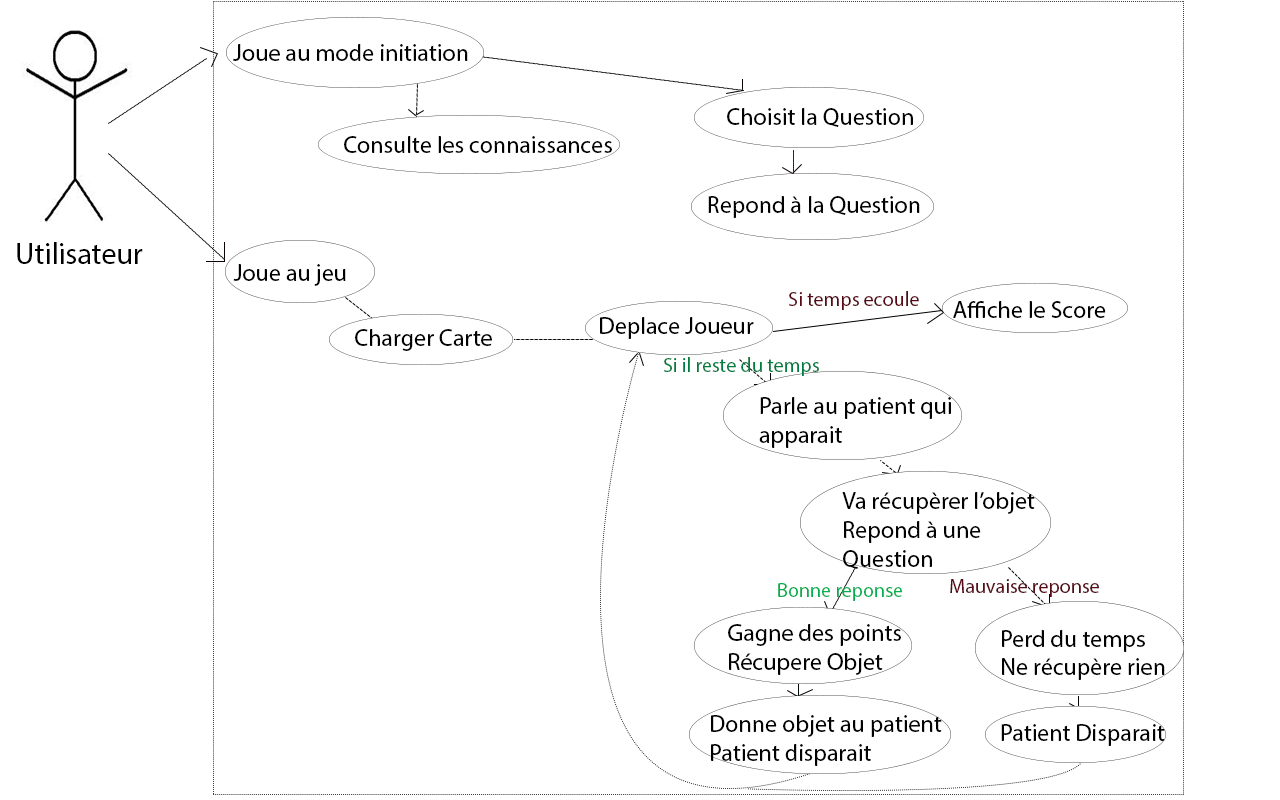
<style>
.page{position:relative;width:1280px;height:800px;background:#ffffff}
.page>*{position:absolute;margin:0}
.t1{font:24px "MyriadPro-Regular";color:#000000}
.t2{font:12px "MyriadPro-Regular";color:#000000}
.t3{font:30px "MyriadPro-Regular";color:#000000}
.t4{font:20px "MyriadPro-Regular";color:#580a16}
.t5{font:20px "MyriadPro-Regular";color:#007c3f}
.t6{font:20px "MyriadPro-Regular";color:#00af4d}
</style>
<div class="page">
<p class="t1" style="left:233px;top:44px;width:235px;height:17px">Joue au mode initiation</p>
<p class="t2" style="left:727px;top:108px;width:186px;height:19px">Choisit la Question</p>
<p class="t2" style="left:344px;top:136px;width:268px;height:17px">Consulte les connaissances</p>
<p class="t2" style="left:708px;top:196px;width:212px;height:22px">Repond à la Question</p>
<p class="t3" style="left:17px;top:242px;width:126px;height:22px">Utilisateur</p>
<p class="t2" style="left:233px;top:264px;width:113px;height:22px">Joue au jeu</p>
<p class="t4" style="left:789px;top:291px;width:130px;height:19px">Si temps ecoule</p>
<p class="t2" style="left:953px;top:301px;width:153px;height:17px">Affiche le Score</p>
<p class="t2" style="left:600px;top:317px;width:154px;height:22px">Deplace Joueur</p>
<p class="t2" style="left:355px;top:329px;width:137px;height:22px">Charger Carte</p>
<p class="t5" style="left:664px;top:357px;width:155px;height:19px">Si il reste du temps</p>
<p class="t2" style="left:759px;top:397px;width:192px;height:51px">Parle au patient qui<br>apparait</p>
<p class="t2" style="left:842px;top:492px;width:193px;height:77px">Va récupèrer l’objet<br>Repond à une<br>Question</p>
<p class="t4" style="left:950px;top:579px;width:149px;height:18px">Mauvaise reponse</p>
<p class="t6" style="left:778px;top:583px;width:124px;height:18px">Bonne reponse</p>
<p class="t2" style="left:728px;top:624px;width:173px;height:51px">Gagne des points<br>Récupere Objet</p>
<p class="t2" style="left:1002px;top:630px;width:163px;height:50px">Perd du temps<br>Ne récupère rien</p>
<p class="t2" style="left:711px;top:715px;width:231px;height:51px">Donne objet au patient<br>Patient disparait</p>
<p class="t2" style="left:1001px;top:724px;width:164px;height:22px">Patient Disparait</p>
</div>
